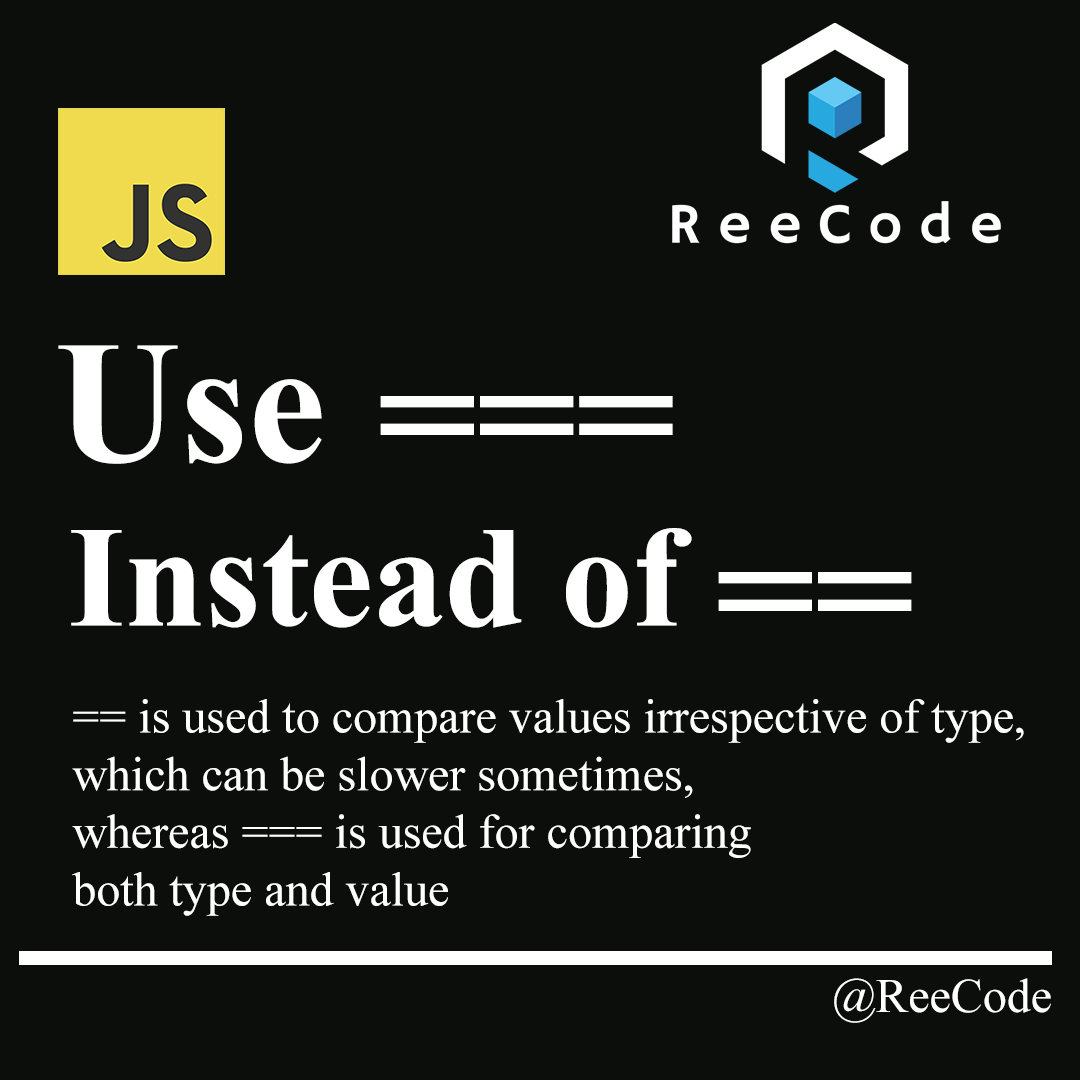
<style>
.page{position:relative;width:1080px;height:1080px;background:#0c0e0c}
.page>*{position:absolute;margin:0}
.t1{font:174px "TimesNewRomanPS-BoldMT";color:#ffffff}
.t2{font:144px "TimesNewRomanPS-BoldMT";color:#ffffff}
.t3{font:48px "TimesNewRomanPSMT";color:#ffffff}
</style>
<div class="page">
<p class="t1" style="left:58px;top:345px;width:264px;height:119px">Use</p>
<p class="t1" style="left:380px;top:396px;width:293px;height:39px">===</p>
<p class="t2" style="left:71px;top:528px;width:621px;height:100px">Instead of</p>
<p class="t1" style="left:718px;top:572px;width:194px;height:39px">==</p>
<p class="t3" style="left:72px;top:699px;width:952px;height:217px">== is used to compare values irrespective of type, <br>which can be slower sometimes,<br>whereas === is used for comparing<br>both type and value</p>
<p class="t3" style="left:834px;top:978px;width:217px;height:45px">@ReeCode</p>
</div>
